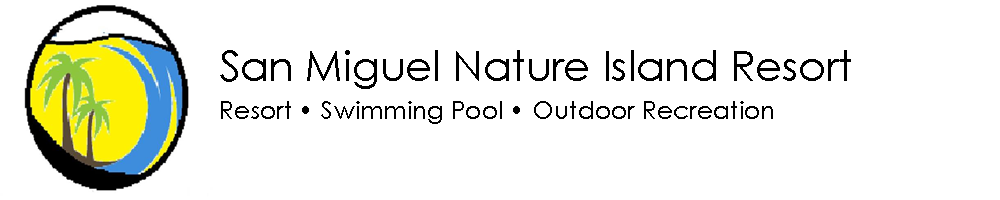
<style>
.page{position:relative;width:1000px;height:200px;background:#ffffff}
.page>*{position:absolute;margin:0}
.t1{font:41.7px "CenturyGothic";color:#000000}
.t2{font:25px "CenturyGothic";color:#000000}
</style>
<div class="page">
<p class="t1" style="left:220px;top:50px;width:631px;height:39px">San Miguel Nature Island Resort</p>
<p class="t2" style="left:221px;top:101px;width:552px;height:23px">Resort • Swimming Pool • Outdoor Recreation</p>
</div>
